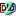
<style>
.page{position:relative;width:16px;height:16px;background:#ffffff}
.page>*{position:absolute;margin:0}
.t1{font:11px "ArialMT"}
.t2{font:20px "ForteMT"}
</style>
<div class="page">
<p class="t1" style="left:0px;top:4px;width:16px;height:8px">DD</p>
<p class="t2" style="left:4px;top:1px;width:8px;height:13px">2</p>
</div>
